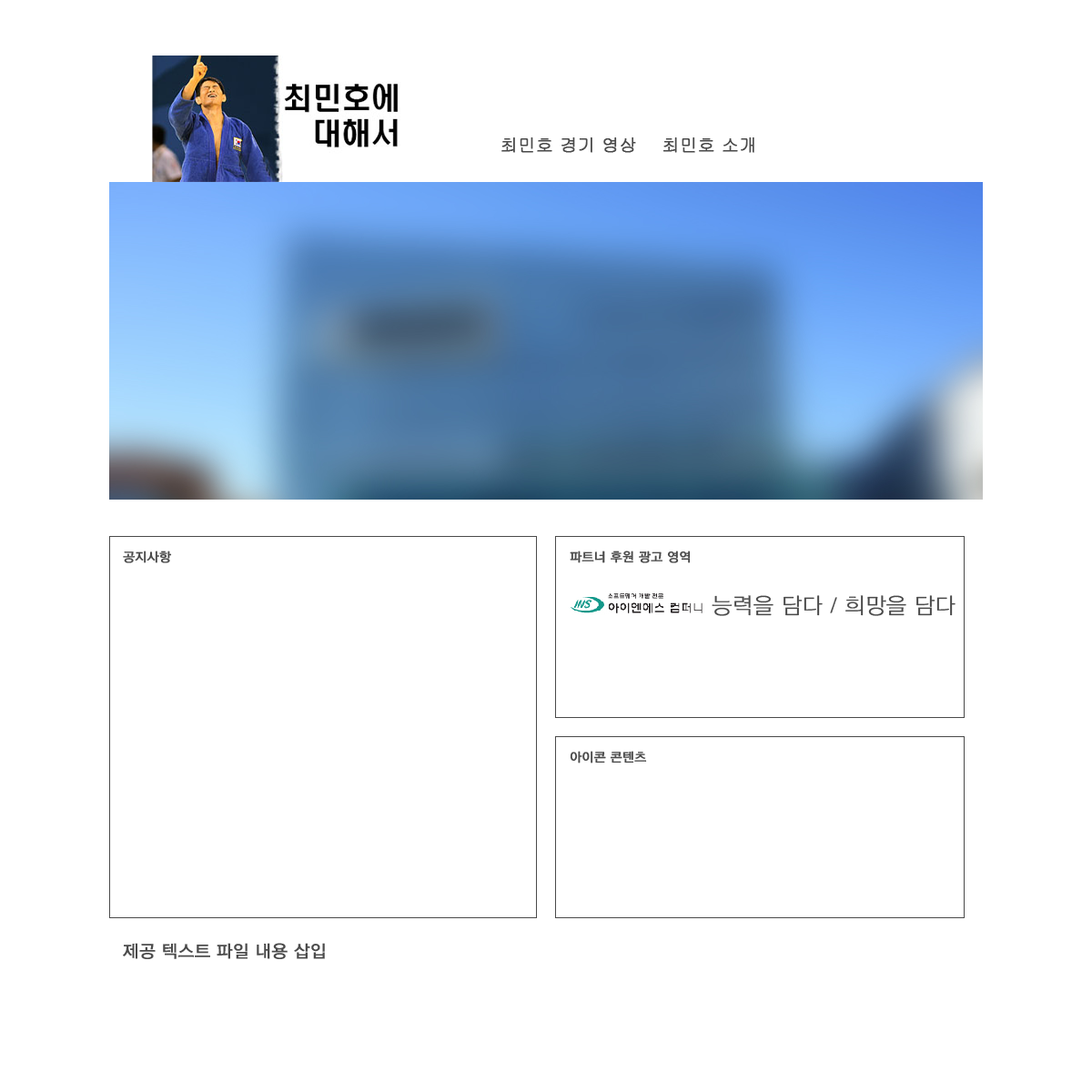
<style>
.page{position:relative;width:1092px;height:1092px;background:#ffffff}
.page>*{position:absolute;margin:0}
.t1{font:17.3px "Gulim";color:#4a4a4a;font-weight:bold}
.t2{font:12.7px "THELuxGoM";color:#4a4a4a;font-weight:bold}
.t3{font:21.8px "THELuxGoL";color:#4a4a4a;font-weight:bold}
.t4{font:17.3px "THELuxGoM";color:#4a4a4a;font-weight:bold}
</style>
<div class="page">
<p class="t1" style="left:501px;top:137px;width:253px;height:16px">최민호 경기 영상    최민호 소개</p>
<p class="t2" style="left:123px;top:551px;width:49px;height:12px">공지사항</p>
<p class="t2" style="left:570px;top:551px;width:121px;height:12px">파트너 후원 광고 영역</p>
<p class="t3" style="left:712px;top:595px;width:243px;height:21px">능력을 담다 / 희망을 담다</p>
<p class="t2" style="left:570px;top:751px;width:77px;height:12px">아이콘 콘텐츠</p>
<p class="t4" style="left:123px;top:943px;width:202px;height:16px">제공 텍스트 파일 내용 삽입</p>
</div>
